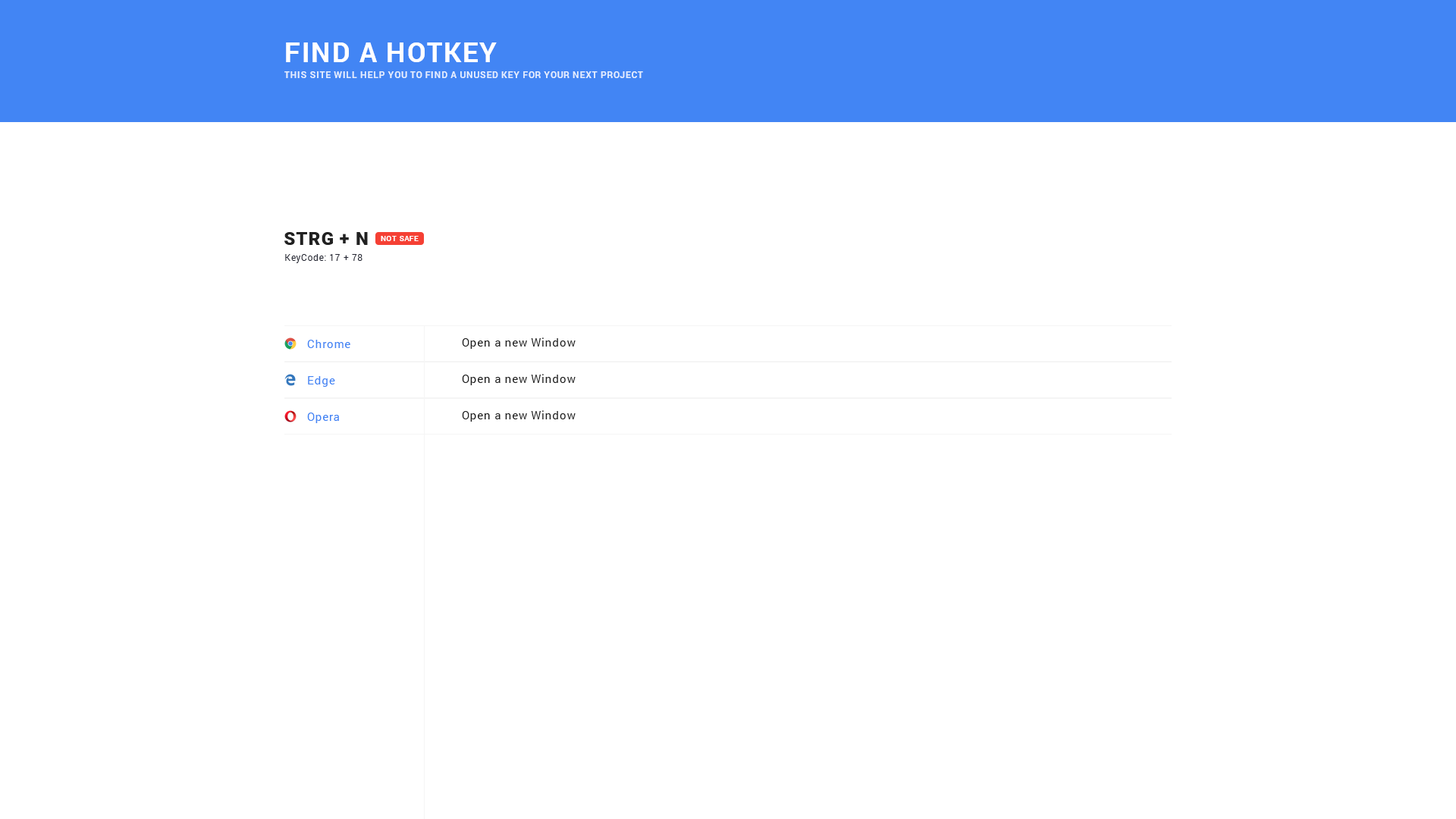
<style>
.page{position:relative;width:1456px;height:819px;background:#ffffff}
.page>*{position:absolute;margin:0}
.t1{font:27.3px "Roboto-Bold";letter-spacing:0.045em;color:#ffffff}
.t2{font:9.1px "Roboto-Bold";letter-spacing:0.045em;color:#e3edfe;text-transform:uppercase}
.t3{font:18.2px "Roboto-Black";letter-spacing:0.045em;color:#212121;text-transform:uppercase}
.t4{font:7.6px "Roboto-Bold";letter-spacing:0.045em;color:#fefefe;text-transform:uppercase}
.t5{font:9.1px "Roboto-Regular";letter-spacing:0.045em;color:#242633}
.t6{font:11.4px "Roboto-Regular";letter-spacing:0.045em;color:#4285f4}
.t7{font:11.4px "Roboto-Regular";letter-spacing:0.045em;color:#212121}
</style>
<div class="page">
<p class="t1" style="left:286px;top:42px;width:211px;height:20px">FIND A HOTKEY</p>
<p class="t2" style="left:284px;top:71px;width:359px;height:7px">this site will help you to find a unused key for youR next Project</p>
<p class="t3" style="left:284px;top:232px;width:84px;height:13px">STRG + N</p>
<p class="t4" style="left:381px;top:236px;width:38px;height:5px">not saFe</p>
<p class="t5" style="left:285px;top:254px;width:77px;height:9px">KeyCode: 17 + 78</p>
<p class="t6" style="left:307px;top:340px;width:43px;height:8px">Chrome</p>
<p class="t7" style="left:462px;top:337px;width:114px;height:12px">Open a new Window</p>
<p class="t6" style="left:308px;top:376px;width:27px;height:11px">Edge</p>
<p class="t7" style="left:462px;top:374px;width:114px;height:11px">Open a new Window</p>
<p class="t6" style="left:307px;top:413px;width:32px;height:10px">Opera</p>
<p class="t7" style="left:462px;top:410px;width:114px;height:12px">Open a new Window</p>
</div>
